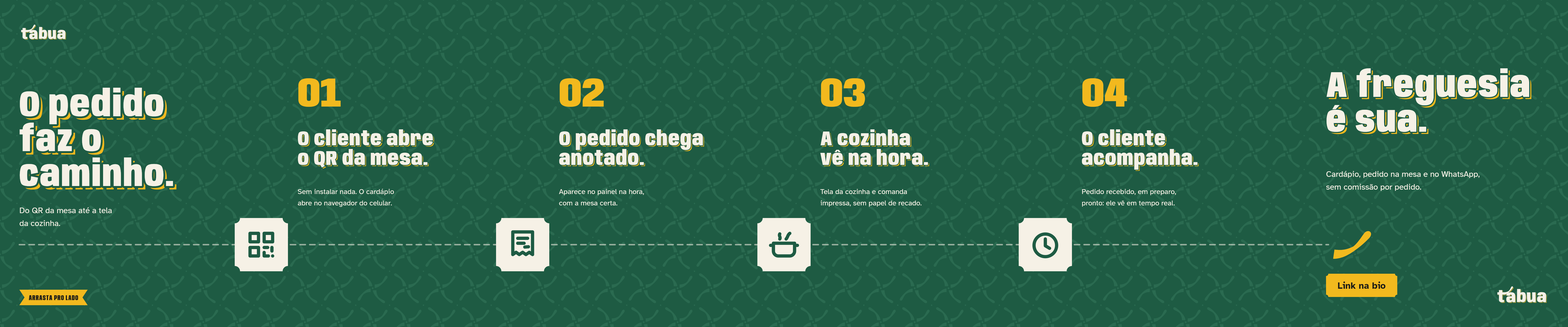
<style>
.page{position:relative;width:1568px;height:327px;background:#1e5b43}
.page>*{position:absolute;margin:0}
.t1{font:36.3px/34.8px "Anybody-Black-W75";letter-spacing:0.034em;color:#f6f1e6}
.t2{font:36.3px/34.8px "Anybody-Black-W75";letter-spacing:0.034em}
.t3{font:41.1px "Anybody-Black-W80";color:#f2b91e}
.t4{font:20.3px/19.6px "Anybody-Black-W75";letter-spacing:0.034em;color:#f6f1e6}
.t5{font:20.3px/19.6px "Anybody-Black-W75";letter-spacing:0.034em}
.t6{font:8.2px/12.8px "AtkinsonHyperlegible-Regular";color:#f6f1e6}
.t7{font:7.3px/11.4px "AtkinsonHyperlegible-Regular";color:#f6f1e6}
.t8{font:9.2px "AtkinsonHyperlegible-Bold";color:#1a1a17}
.t9{font:7.3px "Anybody-ExtraBold-W60";letter-spacing:0.06em;color:#1a1a17}
</style>
<div class="page">
<p class="t1" style="left:1325px;top:67px;width:205px;height:66px">A freguesia<br>é sua.</p>
<p class="t2" style="left:1329px;top:70px;width:202px;height:64px">A freguesia<br>é sua.</p>
<p class="t1" style="left:18px;top:86px;width:157px;height:102px">O pedido<br>faz o<br>caminho.</p>
<p class="t3" style="left:298px;top:78px;width:43px;height:29px">01</p>
<p class="t3" style="left:560px;top:78px;width:44px;height:29px">02</p>
<p class="t3" style="left:821px;top:78px;width:44px;height:29px">03</p>
<p class="t3" style="left:1082px;top:78px;width:45px;height:29px">04</p>
<p class="t2" style="left:23px;top:91px;width:153px;height:98px">O pedido<br>faz o<br>caminho.</p>
<p class="t4" style="left:297px;top:128px;width:137px;height:40px">O cliente abre<br>o QR da mesa.</p>
<p class="t5" style="left:299px;top:130px;width:135px;height:39px">O cliente abre<br>o QR da mesa.</p>
<p class="t4" style="left:558px;top:128px;width:146px;height:38px">O pedido chega<br>anotado.</p>
<p class="t5" style="left:560px;top:130px;width:144px;height:36px">O pedido chega<br>anotado.</p>
<p class="t4" style="left:820px;top:128px;width:109px;height:38px">A cozinha<br>vê na hora.</p>
<p class="t5" style="left:822px;top:130px;width:107px;height:36px">A cozinha<br>vê na hora.</p>
<p class="t4" style="left:1081px;top:128px;width:117px;height:42px">O cliente<br>acompanha.</p>
<p class="t5" style="left:1083px;top:130px;width:116px;height:41px">O cliente<br>acompanha.</p>
<p class="t6" style="left:1326px;top:171px;width:154px;height:20px">Cardápio, pedido na mesa e no WhatsApp,<br>sem comissão por pedido.</p>
<p class="t7" style="left:298px;top:188px;width:96px;height:19px">Sem instalar nada. O cardápio<br>abre no navegador do celular.</p>
<p class="t7" style="left:559px;top:189px;width:85px;height:16px">Aparece no painel na hora,<br>com a mesa certa.</p>
<p class="t7" style="left:820px;top:189px;width:101px;height:17px">Tela da cozinha e comanda<br>impressa, sem papel de recado.</p>
<p class="t7" style="left:1082px;top:189px;width:94px;height:17px">Pedido recebido, em preparo,<br>pronto: ele vê em tempo real.</p>
<p class="t6" style="left:20px;top:207px;width:92px;height:19px">Do QR da mesa até a tela<br>da cozinha.</p>
<p class="t8" style="left:1338px;top:281px;width:48px;height:7px">Link na bio</p>
<p class="t9" style="left:29px;top:295px;width:49px;height:5px">ARRASTA PRO LADO</p>
</div>
